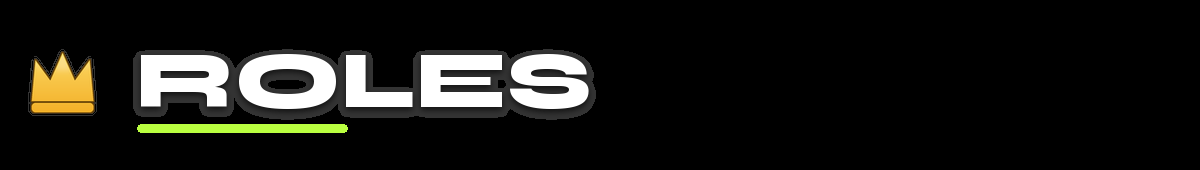
<style>
.page{position:relative;width:1200px;height:170px;background:#000000}
.page>*{position:absolute;margin:0}
.t1{font:80px "Syne-ExtraBold";color:#ffffff}
</style>
<div class="page">
<p class="t1" style="left:141px;top:54px;width:448px;height:55px">ROLES</p>
</div>
